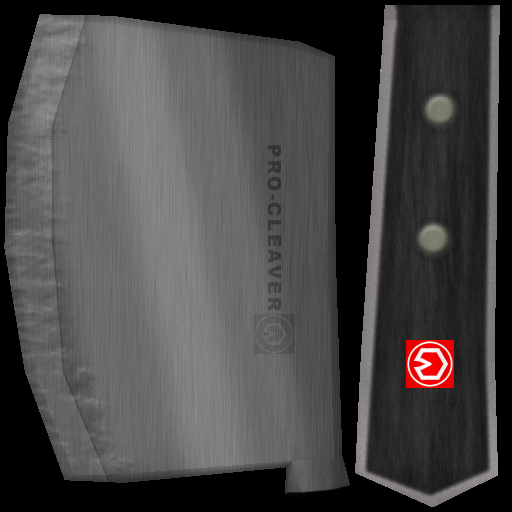
<style>
.page{position:relative;width:512px;height:512px;background:#000000}
.page>*{position:absolute;margin:0}
.t1{font:18px "Arial-Black";letter-spacing:0.145em;color:#393939}
</style>
<div class="page">
<p class="t1" style="left:267px;top:145px;width:15px;height:166px;rotate:90deg">PRO-CLEAVER</p>
</div>
